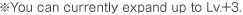
<style>
.page{position:relative;width:243px;height:15px;background:#ffffff}
.page>*{position:absolute;margin:0}
.t1{font:12px "GothicMB101Pro-Regular";color:#4c4843}
</style>
<div class="page">
<p class="t1" style="left:0px;top:2px;width:241px;height:12px">※You can currently expand up to Lv.+3.</p>
</div>
